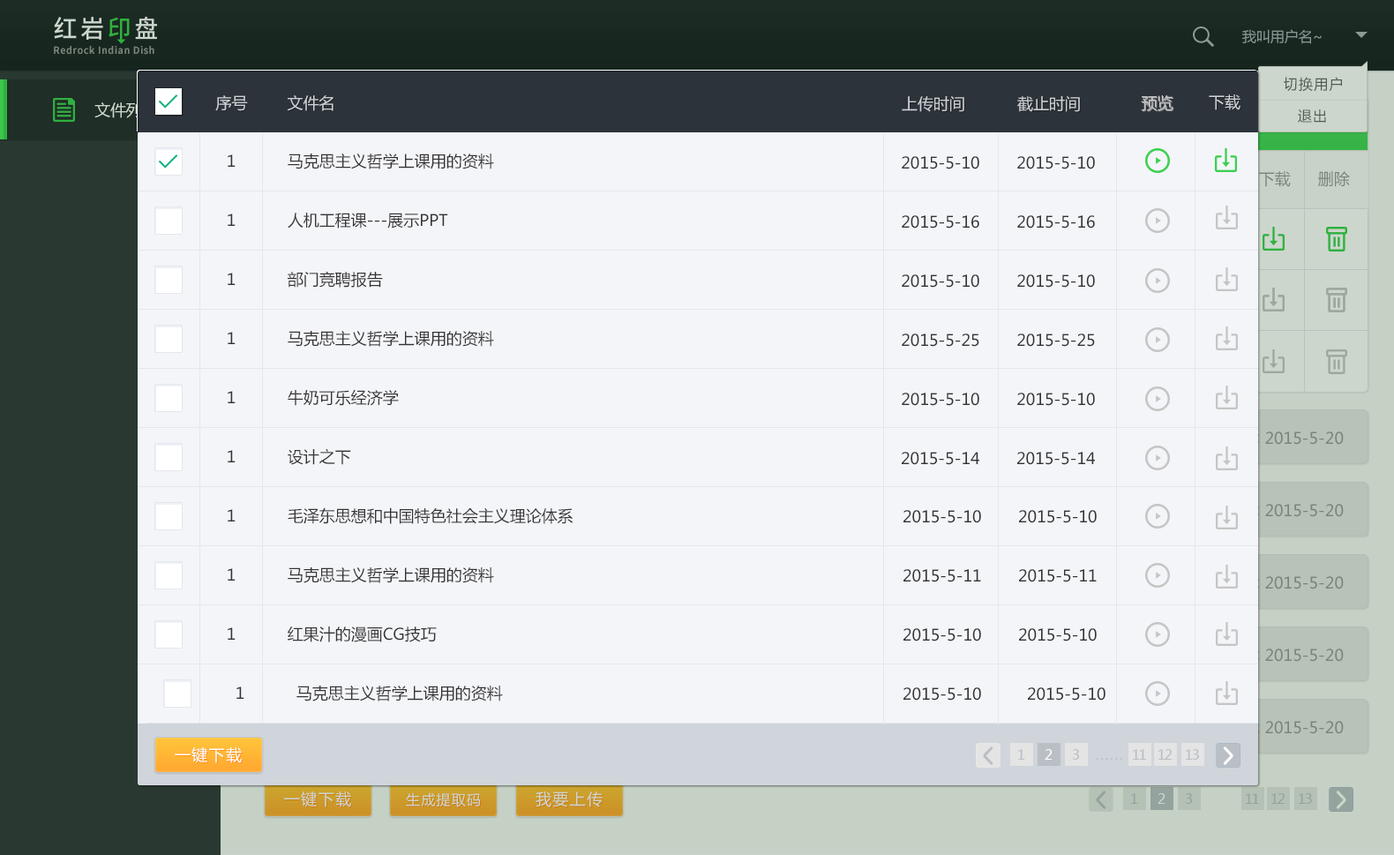
<style>
.page{position:relative;width:1394px;height:855px;background:#f4f5f9}
.page>*{position:absolute;margin:0}
.t1{font:15.9px "MicrosoftYaHei";color:#ced2d6}
.t2{font:15.9px "MicrosoftYaHei";color:#c6c5c5}
.t3{font:15.9px "MicrosoftYaHei";color:#333333}
.t4{font:15.9px "MicrosoftYaHei";letter-spacing:0.08em;color:#ffffff}
.t5{font:14.1px "MicrosoftYaHei";letter-spacing:-0.1em;color:#b9bfc5}
.t6{font:14.1px "MicrosoftYaHei";letter-spacing:-0.1em;color:#ffffff}
</style>
<div class="page">
<p class="t1" style="left:215px;top:95px;width:33px;height:16px">序号</p>
<p class="t1" style="left:287px;top:95px;width:47px;height:16px">文件名</p>
<p class="t1" style="left:902px;top:96px;width:63px;height:16px">上传时间</p>
<p class="t1" style="left:1018px;top:96px;width:62px;height:16px">截止时间</p>
<p class="t2" style="left:1141px;top:95px;width:33px;height:16px">预览</p>
<p class="t1" style="left:1209px;top:94px;width:32px;height:16px">下载</p>
<p class="t3" style="left:228px;top:154px;width:8px;height:13px">1</p>
<p class="t3" style="left:288px;top:154px;width:206px;height:15px">马克思主义哲学上课用的资料</p>
<p class="t3" style="left:902px;top:156px;width:78px;height:13px">2015-5-10</p>
<p class="t3" style="left:1018px;top:156px;width:77px;height:13px">2015-5-10</p>
<p class="t3" style="left:228px;top:214px;width:8px;height:12px">1</p>
<p class="t3" style="left:288px;top:213px;width:160px;height:16px">人机工程课---展示PPT</p>
<p class="t3" style="left:902px;top:215px;width:78px;height:14px">2015-5-16</p>
<p class="t3" style="left:1018px;top:215px;width:77px;height:14px">2015-5-16</p>
<p class="t3" style="left:228px;top:273px;width:8px;height:12px">1</p>
<p class="t3" style="left:288px;top:271px;width:95px;height:17px">部门竞聘报告</p>
<p class="t3" style="left:902px;top:274px;width:78px;height:14px">2015-5-10</p>
<p class="t3" style="left:1018px;top:274px;width:77px;height:14px">2015-5-10</p>
<p class="t3" style="left:228px;top:332px;width:8px;height:12px">1</p>
<p class="t3" style="left:288px;top:331px;width:206px;height:16px">马克思主义哲学上课用的资料</p>
<p class="t3" style="left:902px;top:334px;width:78px;height:13px">2015-5-25</p>
<p class="t3" style="left:1018px;top:334px;width:77px;height:13px">2015-5-25</p>
<p class="t3" style="left:288px;top:389px;width:111px;height:17px">牛奶可乐经济学</p>
<p class="t3" style="left:228px;top:391px;width:8px;height:12px">1</p>
<p class="t3" style="left:902px;top:393px;width:78px;height:13px">2015-5-10</p>
<p class="t3" style="left:1018px;top:393px;width:77px;height:13px">2015-5-10</p>
<p class="t3" style="left:288px;top:448px;width:63px;height:17px">设计之下</p>
<p class="t3" style="left:228px;top:450px;width:8px;height:12px">1</p>
<p class="t3" style="left:902px;top:452px;width:78px;height:13px">2015-5-14</p>
<p class="t3" style="left:1018px;top:452px;width:77px;height:13px">2015-5-14</p>
<p class="t3" style="left:228px;top:509px;width:8px;height:13px">1</p>
<p class="t3" style="left:288px;top:507px;width:286px;height:17px">毛泽东思想和中国特色社会主义理论体系</p>
<p class="t3" style="left:904px;top:510px;width:77px;height:13px">2015-5-10</p>
<p class="t3" style="left:1019px;top:510px;width:78px;height:13px">2015-5-10</p>
<p class="t3" style="left:228px;top:568px;width:8px;height:13px">1</p>
<p class="t3" style="left:288px;top:567px;width:206px;height:16px">马克思主义哲学上课用的资料</p>
<p class="t3" style="left:904px;top:569px;width:77px;height:13px">2015-5-11</p>
<p class="t3" style="left:1019px;top:569px;width:78px;height:13px">2015-5-11</p>
<p class="t3" style="left:228px;top:627px;width:8px;height:13px">1</p>
<p class="t3" style="left:288px;top:627px;width:149px;height:15px">红果汁的漫画CG技巧</p>
<p class="t3" style="left:904px;top:628px;width:77px;height:14px">2015-5-10</p>
<p class="t3" style="left:1019px;top:628px;width:78px;height:14px">2015-5-10</p>
<p class="t3" style="left:237px;top:687px;width:7px;height:12px">1</p>
<p class="t3" style="left:297px;top:686px;width:206px;height:16px">马克思主义哲学上课用的资料</p>
<p class="t3" style="left:904px;top:687px;width:77px;height:14px">2015-5-10</p>
<p class="t3" style="left:1028px;top:687px;width:78px;height:14px">2015-5-10</p>
<p class="t4" style="left:175px;top:747px;width:67px;height:16px">一键下载</p>
<p class="t5" style="left:1018px;top:749px;width:7px;height:11px">1</p>
<p class="t6" style="left:1045px;top:749px;width:8px;height:11px">2</p>
<p class="t5" style="left:1072px;top:749px;width:7px;height:11px">3</p>
<p class="t5" style="left:1133px;top:749px;width:13px;height:11px">11</p>
<p class="t5" style="left:1159px;top:749px;width:13px;height:11px">12</p>
<p class="t5" style="left:1186px;top:749px;width:13px;height:11px">13</p>
<p class="t5" style="left:1096px;top:758px;width:27px;height:2px">. . . . . .</p>
</div>
